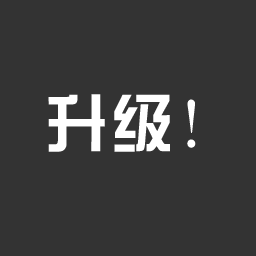
<style>
.page{position:relative;width:256px;height:256px;background:#333333}
.page>*{position:absolute;margin:0}
.t1{font:63px "ç»å¸ç»¼èºä½ç®-regular";letter-spacing:0.04em;color:#ffffff}
</style>
<div class="page">
<p class="t1" style="left:48px;top:94px;width:148px;height:58px">升级!</p>
</div>
